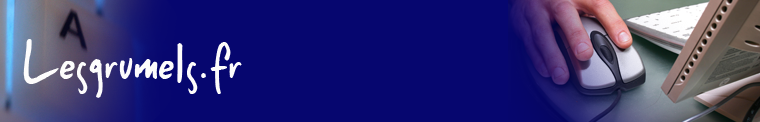
<style>
.page{position:relative;width:760px;height:122px;background:#06066f}
.page>*{position:absolute;margin:0}
.t1{font:60px "Splurge";color:#fdfcfc}
</style>
<div class="page">
<p class="t1" style="left:23px;top:39px;width:219px;height:59px">Lesgrumels.fr</p>
</div>
